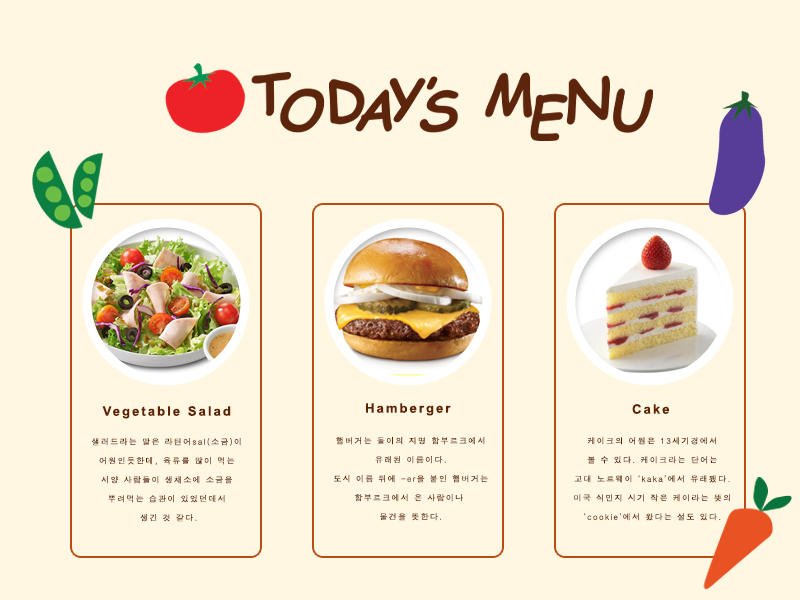
<style>
.page{position:relative;width:800px;height:600px;background:#fff7e1}
.page>*{position:absolute;margin:0}
.t1{font:13px "Arial-BoldMT";letter-spacing:0.16em;color:#5e2201}
.t2{font:8px/19px "Dotum";letter-spacing:0.16em;color:#5e2201}
</style>
<div class="page">
<p class="t1" style="left:102px;top:406px;width:129px;height:13px">Vegetable Salad</p>
<p class="t1" style="left:366px;top:403px;width:85px;height:13px">Hamberger</p>
<p class="t1" style="left:632px;top:404px;width:37px;height:10px">Cake</p>
<p class="t2" style="left:91px;top:438px;width:150px;height:84px;text-align:center">샐러드라는 말은 라틴어sal(소금)이 <br>어원인듯한데, 육류를 많이 먹는 <br>서양 사람들이 생채소에 소금을 <br>뿌려먹는 습관이 있었던데서 <br>생긴 것 같다.</p>
<p class="t2" style="left:334px;top:437px;width:154px;height:84px;text-align:center">햄버거는 돌이의 지명 함부르크에서<br>유래된 이름이다.<br>도시 이름 뒤에 -er을 붙인 햄버거는<br>함부르크에서 온 사람이나 <br>물건을 뜻한다.</p>
<p class="t2" style="left:574px;top:437px;width:156px;height:84px;text-align:center">케이크의 어원은 13세기경에서<br>볼 수 있다. 케이크라는 단어는<br>고대 노르웨이 ‘kaka’에서 유래됐다.<br>미국 식민지 시기 작은 케이라는 뜻의<br>‘cookie’에서 왔다는 설도 있다.</p>
</div>
